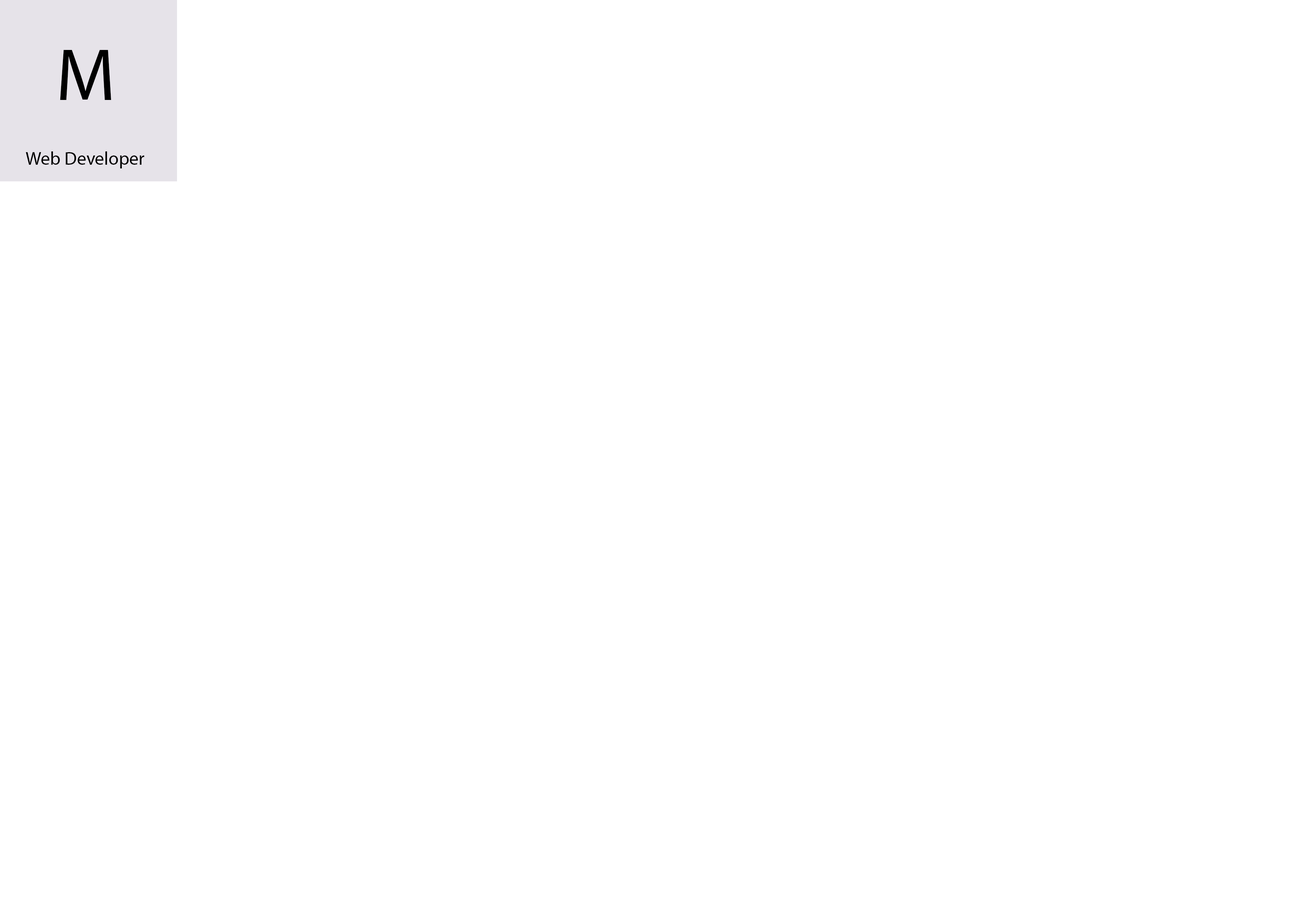
<style>
.page{position:relative;width:1299px;height:918px;background:#ffffff}
.page>*{position:absolute;margin:0}
.t1{font:74px "MyriadPro-Regular";color:#000000}
.t2{font:18.5px "MyriadPro-Regular";color:#000000}
</style>
<div class="page">
<p class="t1" style="left:60px;top:50px;width:51px;height:50px">M</p>
<p class="t2" style="left:26px;top:151px;width:118px;height:17px">Web Developer</p>
</div>
